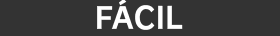
<style>
.page{position:relative;width:280px;height:36px;background:#333333}
.page>*{position:absolute;margin:0}
.t1{font:29.3px "RodinPro-B";letter-spacing:-0.002em;color:#ffffff}
</style>
<div class="page">
<p class="t1" style="left:97px;top:0px;width:86px;height:30px">FÁCIL</p>
</div>
